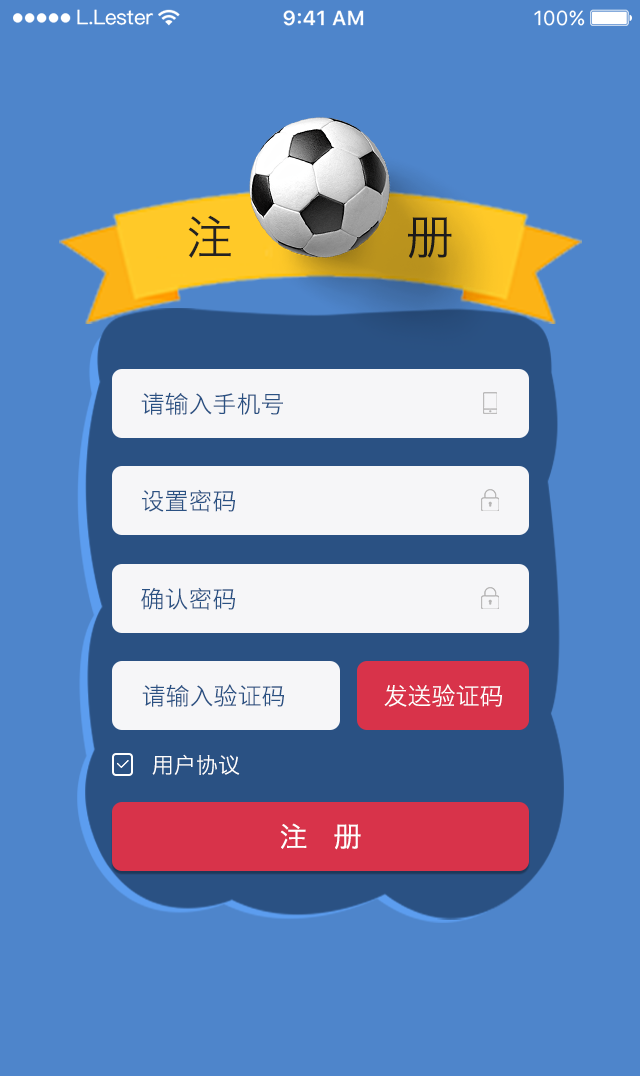
<style>
.page{position:relative;width:640px;height:1076px;background:#4e85cb}
.page>*{position:absolute;margin:0}
.t1{font:47.2px "HiraginoSansGB-W3";color:#232222}
.t2{font:24px "HiraginoSansGB-W3";color:#2a5183}
.t3{font:24px "HiraginoSansGB-W3";color:#ffffff}
.t4{font:22px "HiraginoSansGB-W3";color:#ffffff}
.t5{font:28px "HiraginoSansGB-W3";letter-spacing:0.3em;color:#ffffff}
</style>
<div class="page">
<p class="t1" style="left:188px;top:215px;width:264px;height:44px">注           册</p>
<p class="t2" style="left:141px;top:392px;width:142px;height:23px">请输入手机号</p>
<p class="t2" style="left:141px;top:489px;width:95px;height:23px">设置密码</p>
<p class="t2" style="left:141px;top:587px;width:95px;height:23px">确认密码</p>
<p class="t2" style="left:142px;top:684px;width:143px;height:23px">请输入验证码</p>
<p class="t3" style="left:384px;top:684px;width:119px;height:23px">发送验证码</p>
<p class="t4" style="left:152px;top:754px;width:88px;height:21px">用户协议</p>
<p class="t5" style="left:280px;top:823px;width:81px;height:27px">注 册</p>
</div>
